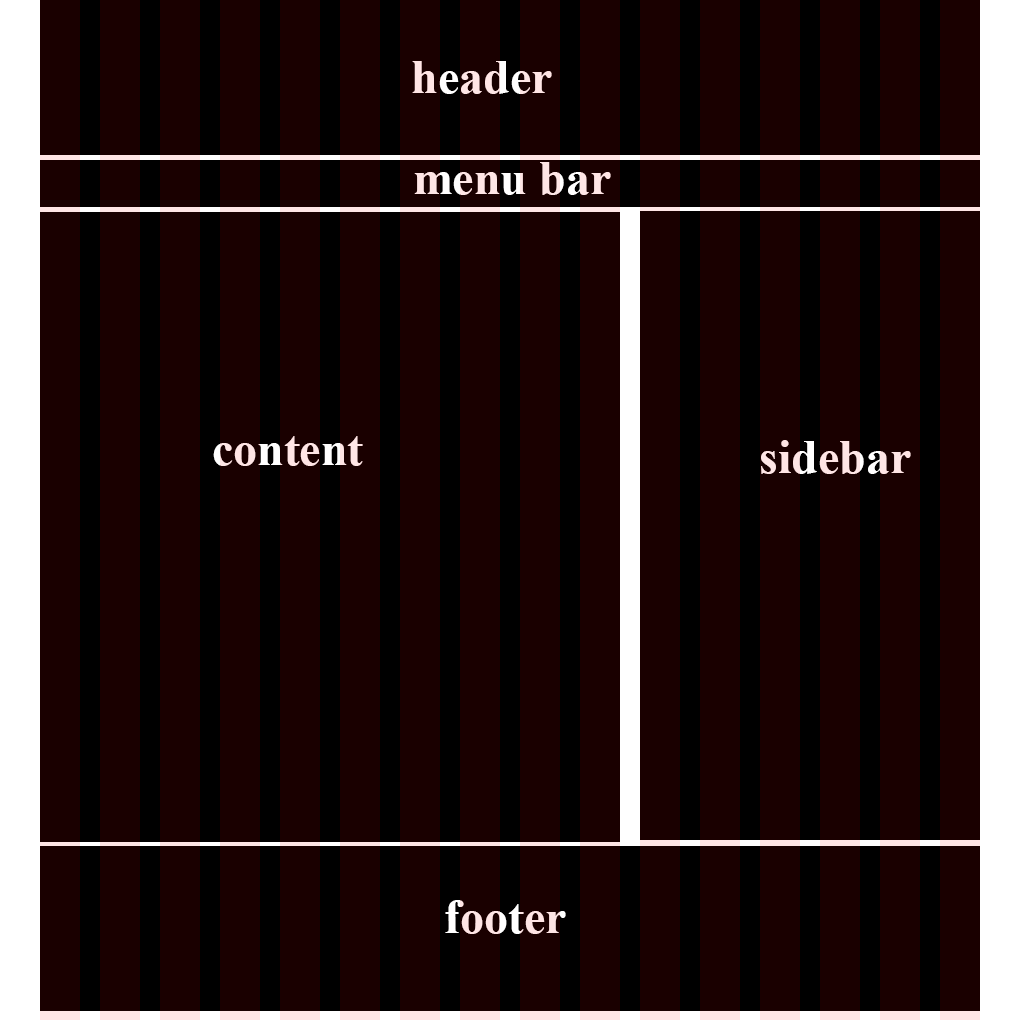
<style>
.page{position:relative;width:1020px;height:1020px;background:#1a0000}
.page>*{position:absolute;margin:0}
.t1{font:48px "TimesNewRomanPS-BoldMT"}
.t2{font:48px "TimesNewRomanPS-BoldMT";color:#ffe5e5}
</style>
<div class="page">
<p class="t1" style="left:412px;top:61px;width:140px;height:33px">header</p>
<p class="t1" style="left:414px;top:162px;width:197px;height:33px">menu bar</p>
<p class="t1" style="left:213px;top:436px;width:150px;height:30px">content</p>
<p class="t2" style="left:761px;top:440px;width:150px;height:34px">sidebar</p>
<p class="t1" style="left:445px;top:900px;width:121px;height:34px">footer</p>
</div>
